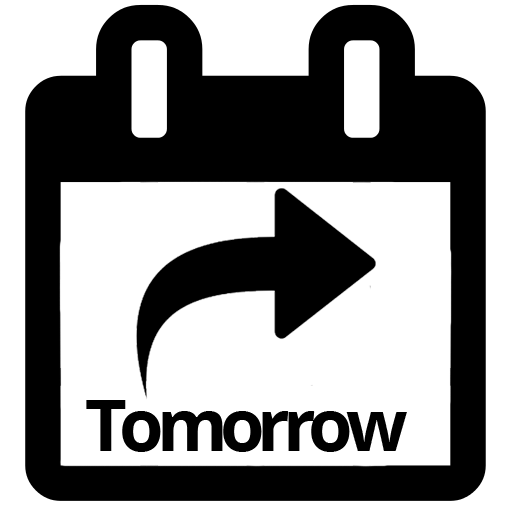
<style>
.page{position:relative;width:512px;height:512px;background:#ffffff}
.page>*{position:absolute;margin:0}
.t1{font:72px "OpenSans-Bold";letter-spacing:-0.1em;color:#000000}
</style>
<div class="page">
<p class="t1" style="left:86px;top:400px;width:321px;height:52px">Tomorrow</p>
</div>
